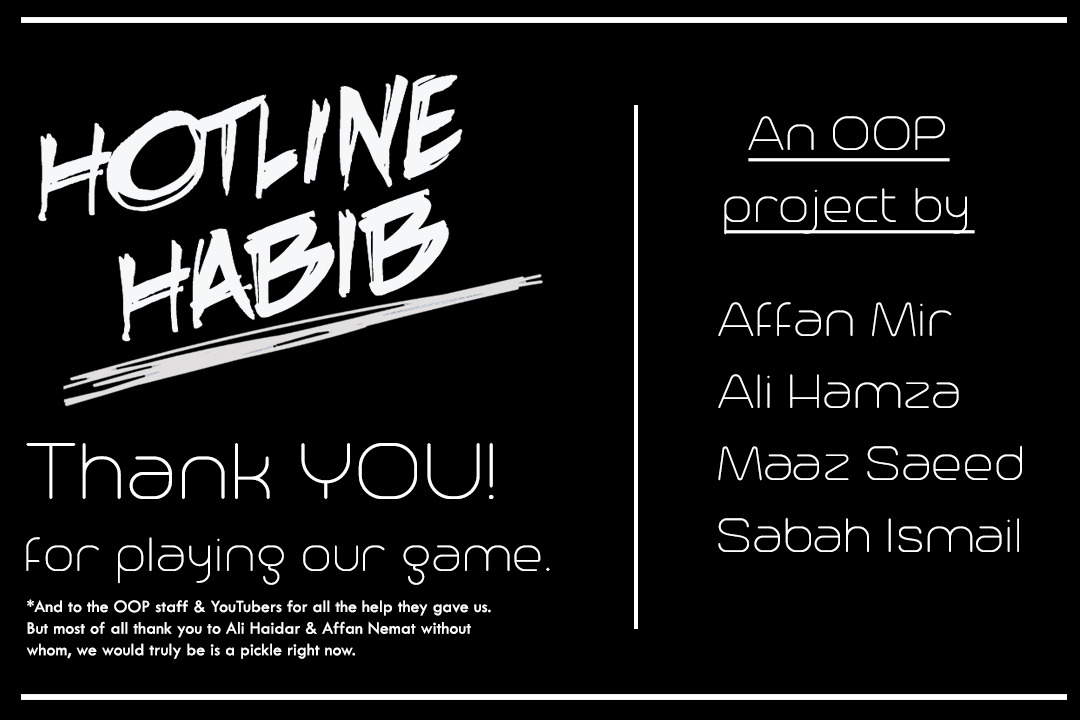
<style>
.page{position:relative;width:1080px;height:720px;background:#000000}
.page>*{position:absolute;margin:0}
.t1{font:60px "Trench-Thin";color:#ffffff;text-decoration:underline}
.t2{font:60px "Trench-Thin";color:#ffffff}
.t3{font:100px "Trench-Thin";color:#ffffff}
.t4{font:18px "TwCenMT-Regular";color:#ffffff}
</style>
<div class="page">
<p class="t1" style="left:724px;top:116px;width:251px;height:119px"><span class="t2">  </span>An OOP<br>project by</p>
<p class="t2" style="left:718px;top:302px;width:304px;height:250px">Affan Mir<br>Ali Hamza<br>Maaz Saeed<br>Sabah Ismail</p>
<p class="t2" style="left:26px;top:442px;width:524px;height:143px"><span class="t3">Thank YOU!<br></span>for playing our game.</p>
<p class="t4" style="left:26px;top:599px;width:465px;height:60px">*And to the OOP staff &amp; YouTubers for all the help they gave us.<br>But most of all thank you to Ali Haidar &amp; Affan Nemat without <br>whom, we would truly be is a pickle right now.</p>
</div>
